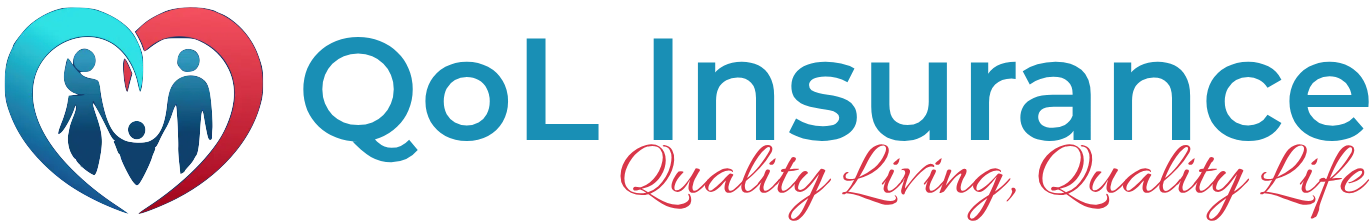
<style>
.page{position:relative;width:1370px;height:221px;background:#ffffff}
.page>*{position:absolute;margin:0}
.t1{font:145px "Montserrat-SemiBold";color:#198fb5}
.t2{font:78px "Allura-Regular";color:#d93649}
</style>
<div class="page">
<p class="t1" style="left:303px;top:37px;width:1066px;height:126px">QoL Insurance</p>
<p class="t2" style="left:620px;top:144px;width:750px;height:77px">Quality Living, Quality Life</p>
</div>
